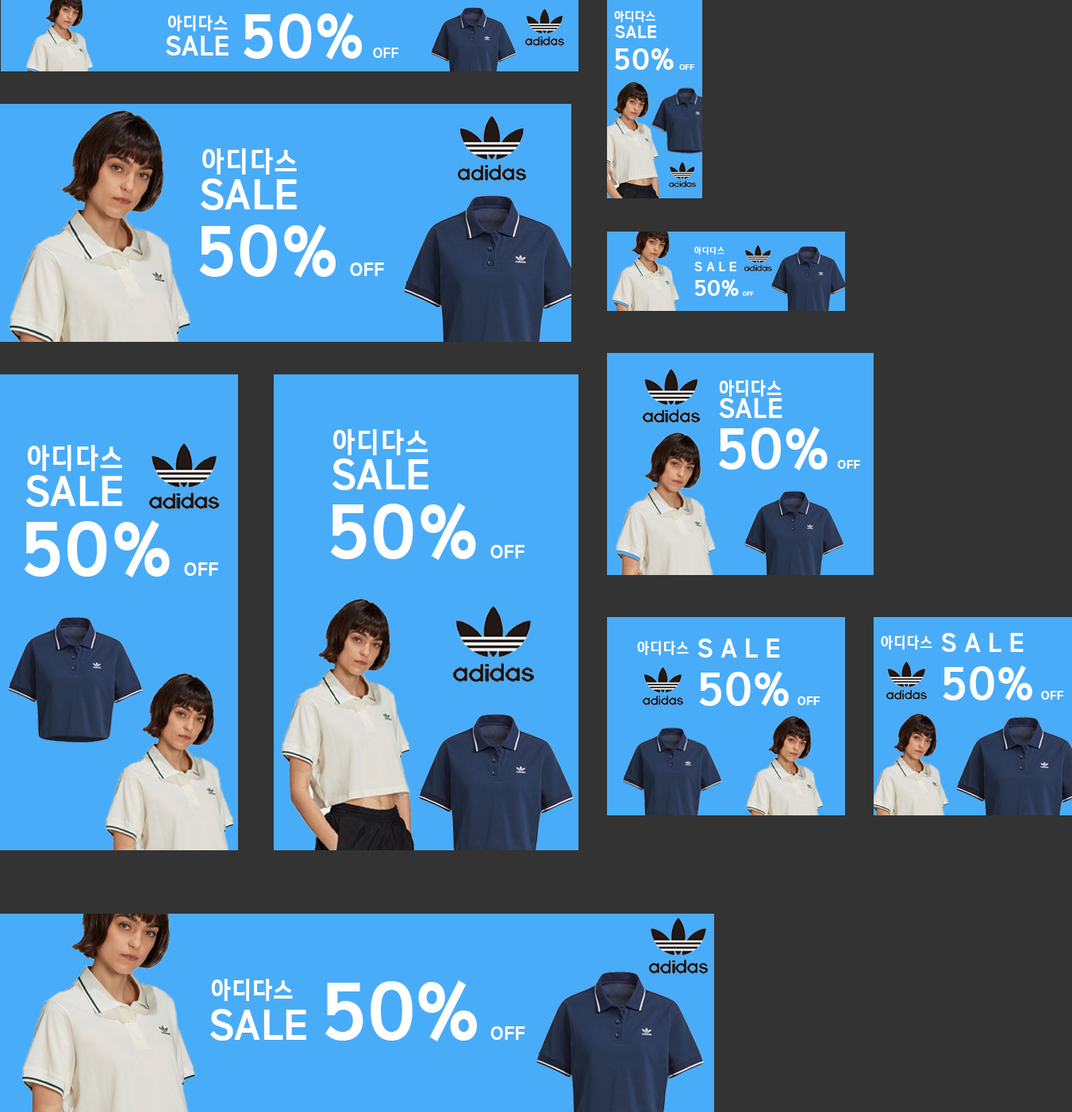
<style>
.page{position:relative;width:1072px;height:1112px;background:#49acf8}
.page>*{position:absolute;margin:0}
.t1{font:17.3px "LeferiBaseType-Bold";letter-spacing:0.04em;color:#ffffff;scale:0.87 1}
.t2{font:59.3px "LeferiBaseType-Bold";letter-spacing:0.04em;color:#ffffff;scale:0.87 1}
.t3{font:13.5px "LeferiBaseType-Bold";letter-spacing:0.04em;color:#ffffff;scale:0.87 1}
.t4{font:11.7px "LeferiBaseType-Bold";letter-spacing:0.04em;color:#ffffff;scale:0.87 1}
.t5{font:17.6px "LeferiBaseType-Bold";letter-spacing:0.04em;color:#ffffff;scale:0.87 1}
.t6{font:26.8px "LeferiBaseType-Bold";letter-spacing:0.04em;color:#ffffff;scale:0.87 1}
.t7{font:29.3px "LeferiBaseType-Bold";letter-spacing:0.04em;color:#ffffff;scale:0.87 1}
.t8{font:7.8px "LeferiBaseType-Bold";letter-spacing:0.04em;color:#ffffff;scale:0.87 1}
.t9{font:27.4px "LeferiBaseType-Bold";letter-spacing:0.04em;color:#ffffff;scale:0.87 1}
.t10{font:41.1px "LeferiBaseType-Bold";letter-spacing:0.04em;color:#ffffff;scale:0.87 1}
.t11{font:68.4px "LeferiBaseType-Bold";letter-spacing:0.04em;color:#ffffff;scale:0.87 1}
.t12{font:18.2px "LeferiBaseType-Bold";letter-spacing:0.04em;color:#ffffff;scale:0.87 1}
.t13{font:8.7px "LeferiBaseType-Bold";letter-spacing:0.04em;color:#ffffff;scale:0.87 1}
.t14{font:13px "LeferiBaseType-Bold";letter-spacing:0.04em;color:#ffffff;scale:0.87 1}
.t15{font:21.7px "LeferiBaseType-Bold";letter-spacing:0.04em;color:#ffffff;scale:0.87 1}
.t16{font:5.8px "LeferiBaseType-Bold";letter-spacing:0.04em;color:#ffffff;scale:0.87 1}
.t17{font:17.9px "LeferiBaseType-Bold";letter-spacing:0.04em;color:#ffffff;scale:0.87 1}
.t18{font:26.9px "LeferiBaseType-Bold";letter-spacing:0.04em;color:#ffffff;scale:0.87 1}
.t19{font:54.7px "LeferiBaseType-Bold";letter-spacing:0.04em;color:#ffffff;scale:0.87 1}
.t20{font:12px "LeferiBaseType-Bold";letter-spacing:0.04em;color:#ffffff;scale:0.87 1}
.t21{font:73px "LeferiBaseType-Bold";letter-spacing:0.04em;color:#ffffff;scale:0.87 1}
.t22{font:14.7px "LeferiBaseType-Bold";letter-spacing:0.04em;color:#ffffff;scale:0.87 1}
.t23{font:25.5px "LeferiBaseType-Bold";letter-spacing:0.04em;color:#ffffff;scale:0.87 1}
.t24{font:44.5px "LeferiBaseType-Bold";letter-spacing:0.04em;color:#ffffff;scale:0.87 1}
.t25{font:11.9px "LeferiBaseType-Bold";letter-spacing:0.04em;color:#ffffff;scale:0.87 1}
.t26{font:23.4px "LeferiBaseType-Bold";letter-spacing:0.04em;color:#ffffff;scale:0.87 1}
.t27{font:77.6px "LeferiBaseType-Bold";letter-spacing:0.02em;color:#ffffff;scale:0.87 1}
</style>
<div class="page">
<p class="t1" style="left:168px;top:15px;width:60px;height:17px">아디다스</p>
<p class="t2" style="left:244px;top:13px;width:154px;height:47px">50% <span class="t3">OFF</span></p>
<p class="t4" style="left:614px;top:11px;width:41px;height:11px">아디다스</p>
<p class="t5" style="left:615px;top:25px;width:41px;height:13px">SALE</p>
<p class="t6" style="left:166px;top:36px;width:63px;height:20px">SALE</p>
<p class="t7" style="left:615px;top:48px;width:80px;height:23px">50% <span class="t8">OFF</span></p>
<p class="t9" style="left:202px;top:148px;width:95px;height:27px">아디다스</p>
<p class="t10" style="left:201px;top:179px;width:96px;height:31px">SALE</p>
<p class="t11" style="left:199px;top:225px;width:185px;height:53px">50% <span class="t12">OFF</span></p>
<p class="t13" style="left:694px;top:247px;width:30px;height:8px">아디다스</p>
<p class="t14" style="left:694px;top:262px;width:42px;height:9px">S A L E</p>
<p class="t15" style="left:694px;top:279px;width:60px;height:18px">50% <span class="t16">OFF</span></p>
<p class="t17" style="left:719px;top:380px;width:63px;height:17px">아디다스</p>
<p class="t18" style="left:719px;top:398px;width:63px;height:20px">SALE</p>
<p class="t9" style="left:333px;top:429px;width:95px;height:26px">아디다스</p>
<p class="t19" style="left:719px;top:427px;width:141px;height:44px">50% <span class="t20">OFF</span></p>
<p class="t9" style="left:28px;top:445px;width:94px;height:26px">아디다스</p>
<p class="t10" style="left:332px;top:459px;width:96px;height:31px">SALE</p>
<p class="t10" style="left:26px;top:475px;width:96px;height:32px">SALE</p>
<p class="t21" style="left:330px;top:503px;width:194px;height:57px">50% <span class="t12">OFF</span></p>
<p class="t21" style="left:24px;top:520px;width:194px;height:58px">50% <span class="t12">OFF</span></p>
<p class="t22" style="left:637px;top:641px;width:52px;height:14px">아디다스</p>
<p class="t23" style="left:697px;top:639px;width:83px;height:19px">S A L E</p>
<p class="t22" style="left:881px;top:636px;width:51px;height:14px">아디다스</p>
<p class="t23" style="left:941px;top:633px;width:83px;height:19px">S A L E</p>
<p class="t24" style="left:943px;top:666px;width:121px;height:35px">50% <span class="t25">OFF</span></p>
<p class="t24" style="left:699px;top:671px;width:121px;height:35px">50% <span class="t25">OFF</span></p>
<p class="t26" style="left:211px;top:979px;width:82px;height:22px">아디다스</p>
<p class="t27" style="left:325px;top:981px;width:200px;height:61px">50% <span class="t12">OFF</span></p>
<p class="t10" style="left:210px;top:1009px;width:96px;height:32px">SALE</p>
</div>
